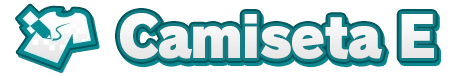
<style>
.page{position:relative;width:458px;height:76px;background:#ffffff}
.page>*{position:absolute;margin:0}
.t1{font:56px "RodinPro-UB";letter-spacing:-0.035em;color:#f0f0f0}
</style>
<div class="page">
<p class="t1" style="left:120px;top:13px;width:314px;height:46px">Camiseta E</p>
</div>
